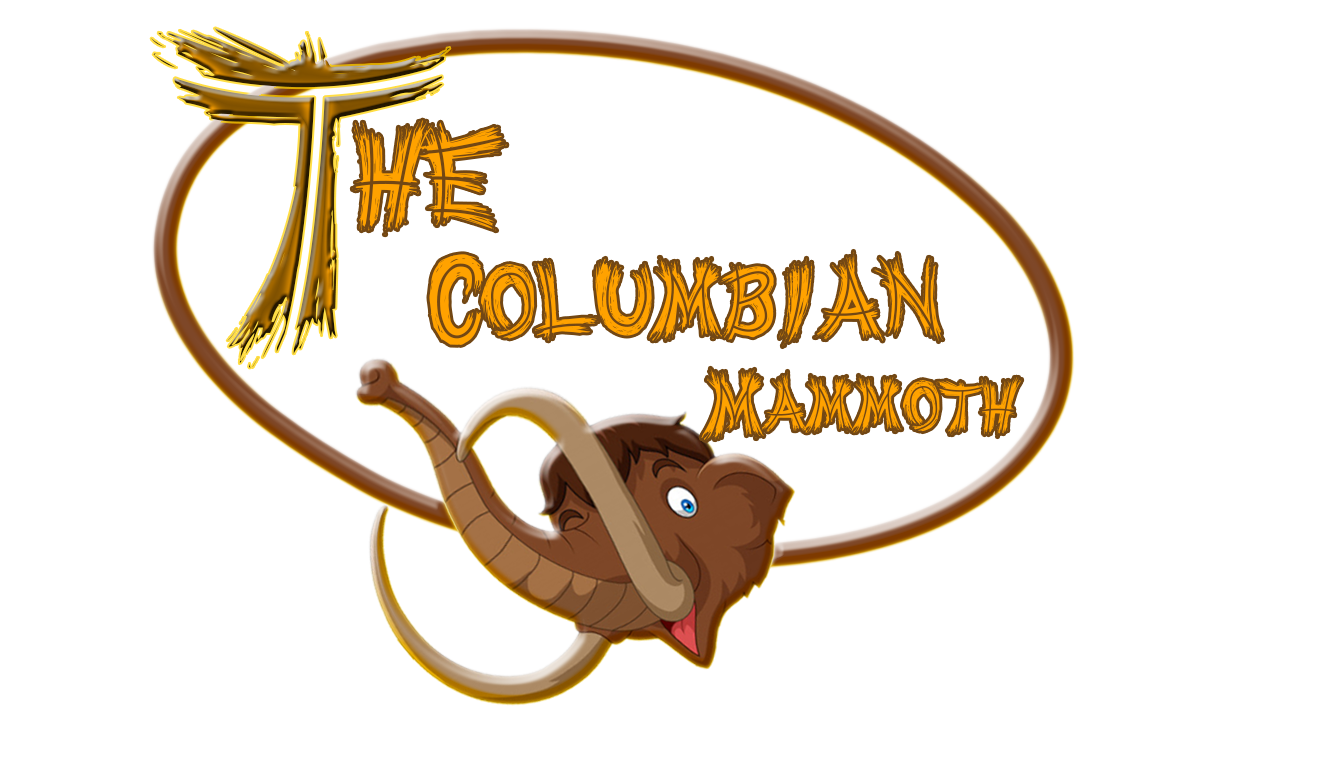
<style>
.page{position:relative;width:1336px;height:782px;background:#ffffff}
.page>*{position:absolute;margin:0}
.t1{font:658px "WereWolf"}
.t2{font:203px "WereWolf";color:#ffa200}
.t3{font:153px "WereWolf";color:#ffa200}
.t4{font:105px "WereWolf";color:#ffa200}
</style>
<div class="page">
<p class="t1" style="left:151px;top:28px;width:299px;height:340px">t</p>
<p class="t2" style="left:352px;top:120px;width:155px;height:115px">he</p>
<p class="t3" style="left:429px;top:251px;width:514px;height:96px">Columbian</p>
<p class="t4" style="left:701px;top:368px;width:321px;height:73px">Mammoth</p>
</div>
